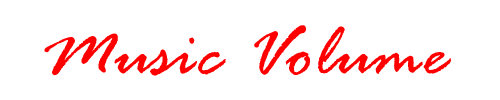
<style>
.page{position:relative;width:500px;height:100px;background:#ffffff}
.page>*{position:absolute;margin:0}
.t1{font:78px "RageItalic";color:#ff0000}
</style>
<div class="page">
<p class="t1" style="left:44px;top:25px;width:407px;height:51px">Music Volume</p>
</div>
